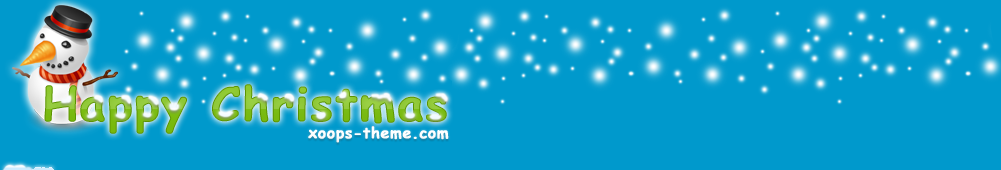
<style>
.page{position:relative;width:1001px;height:170px;background:#0099cc}
.page>*{position:absolute;margin:0}
.t1{font:45.8px "ComicSansMS-Bold";letter-spacing:0.025em;font-weight:bold}
.t2{font:15.3px "ComicSansMS-Bold";letter-spacing:0.025em;color:#ffffff;font-weight:bold}
</style>
<div class="page">
<p class="t1" style="left:44px;top:84px;width:403px;height:50px">Happy Christmas</p>
<p class="t2" style="left:308px;top:126px;width:141px;height:17px">xoops-theme.com</p>
</div>
